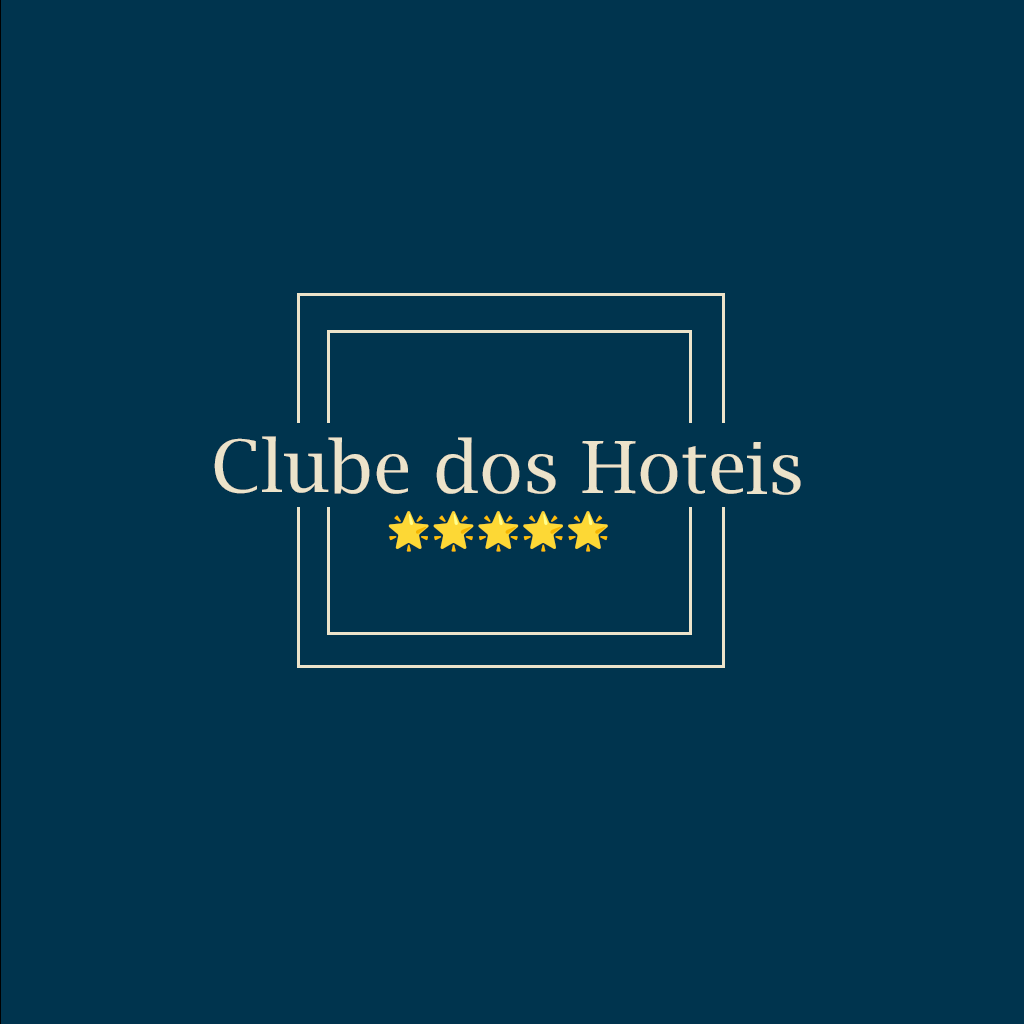
<style>
.page{position:relative;width:1024px;height:1024px;background:#00344e}
.page>*{position:absolute;margin:0}
.t1{font:72px "LucidaBright";color:#ece3ca}
</style>
<div class="page">
<p class="t1" style="left:214px;top:436px;width:587px;height:59px">Clube dos Hoteis</p>
</div>
